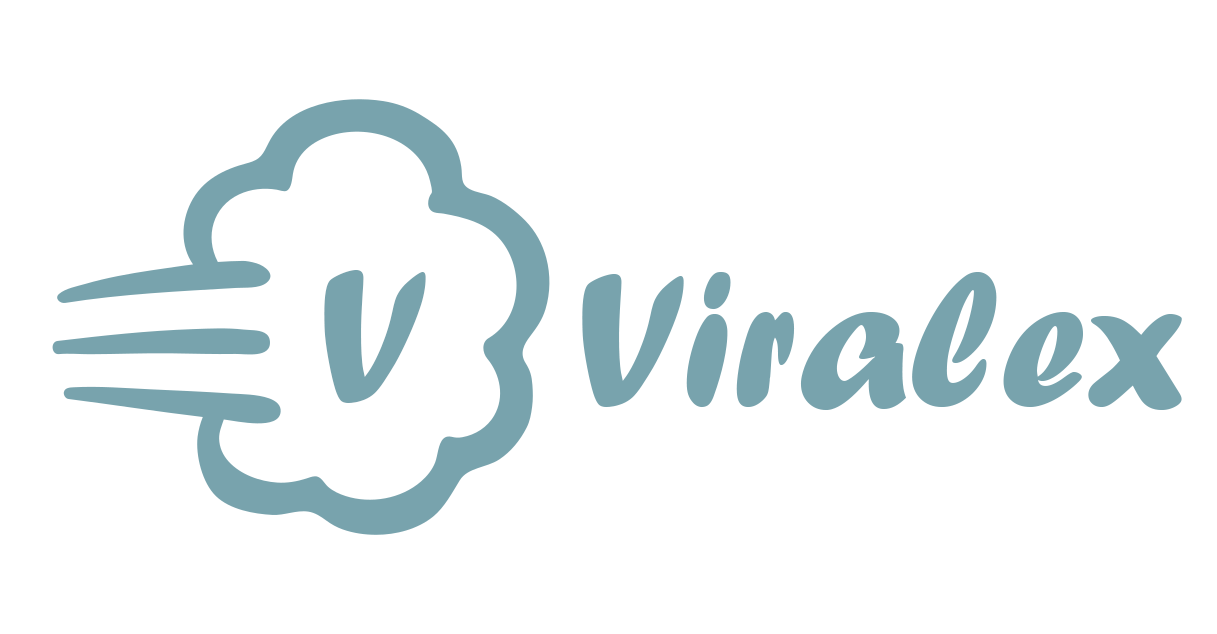
<style>
.page{position:relative;width:1217px;height:634px;background:#ffffff}
.page>*{position:absolute;margin:0}
.t1{font:200px "ForteMT";color:#78a3ad}
</style>
<div class="page">
<p class="t1" style="left:582px;top:272px;width:600px;height:138px">Viralex</p>
</div>
